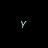
<style>
.page{position:relative;width:48px;height:48px;background:#000000}
.page>*{position:absolute;margin:0}
.t1{font:8.8px "AvantGardeLT-ExtraLightObl";text-transform:uppercase}
</style>
<div class="page">
<p class="t1" style="left:21px;top:21px;width:6px;height:7px">y</p>
</div>
